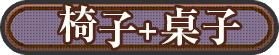
<style>
.page{position:relative;width:279px;height:55px}
.page>*{position:absolute;margin:0}
.t1{font:40px "RyuminPr6N-ExBold";letter-spacing:-0.08em;color:#fffff7}
.t2{font:30px "RyuminPr6N-ExBold";letter-spacing:0.075em;color:#fffff7}
.t3{font:40px "RyuminPr6N-ExBold";letter-spacing:0.075em;color:#fffff7}
</style>
<div class="page">
<p class="t1" style="left:59px;top:5px;width:38px;height:38px">椅</p>
<p class="t1" style="left:99px;top:11px;width:37px;height:37px">子</p>
<p class="t2" style="left:139px;top:7px;width:101px;height:39px">+<span class="t3">桌</span><span class="t1">子</span></p>
</div>
